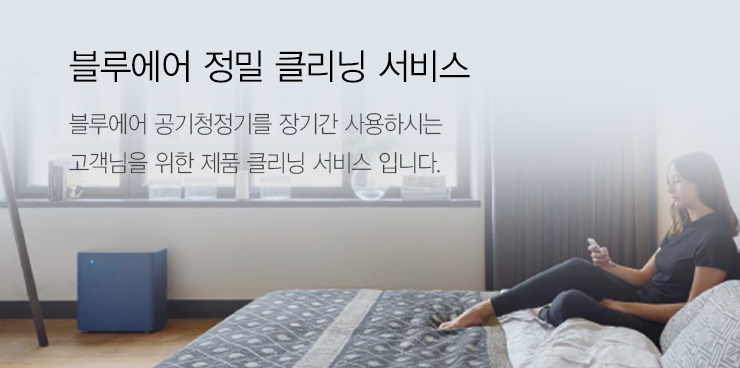
<style>
.page{position:relative;width:740px;height:368px}
.page>*{position:absolute;margin:0}
.t1{font:36px "YDVYGO32";letter-spacing:-0.025em;color:#000000;scale:0.95 1}
.t2{font:24px/39px "YDVYGO31";letter-spacing:-0.025em;color:#444444;scale:0.91 1}
.t3{font:24px/26px "YDVYGO31";letter-spacing:-0.025em;color:#444444;scale:0.91 1}
</style>
<div class="page">
<p class="t1" style="left:69px;top:50px;width:401px;height:33px">블루에어 정밀 클리닝 서비스</p>
<p class="t2" style="left:69px;top:113px;width:374px;height:61px"><span class="t3">블루에어 공기청정기를 장기간 사용하시는<br></span>고객님을 위한 제품 클리닝 서비스 입니다.</p>
</div>
